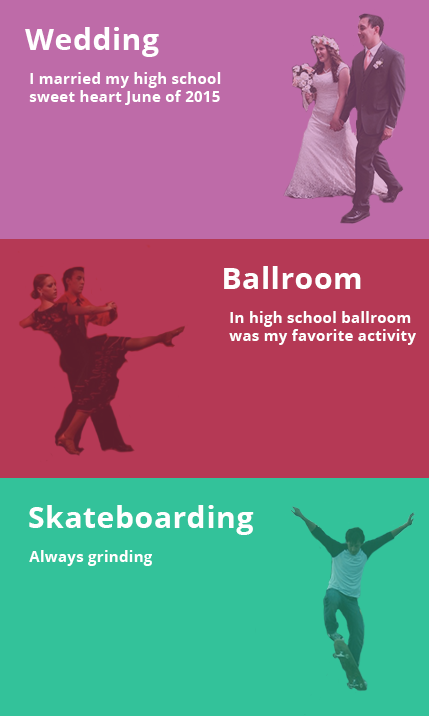
<style>
.page{position:relative;width:429px;height:716px;background:#33c29a}
.page>*{position:absolute;margin:0}
.t1{font:30px "OpenSans-Bold";letter-spacing:0.02em;color:#ffffff}
.t2{font:15px "OpenSans-Bold";letter-spacing:0.02em;color:#ffffff}
</style>
<div class="page">
<p class="t1" style="left:25px;top:27px;width:134px;height:30px">Wedding</p>
<p class="t2" style="left:29px;top:72px;width:192px;height:33px">I married my high school sweet heart June of 2015</p>
<p class="t1" style="left:224px;top:266px;width:137px;height:23px">Ballroom</p>
<p class="t2" style="left:229px;top:311px;width:187px;height:34px">In high school ballroom was my favorite activity</p>
<p class="t1" style="left:29px;top:505px;width:225px;height:30px">Skateboarding</p>
<p class="t2" style="left:29px;top:550px;width:123px;height:16px">Always grinding</p>
</div>
